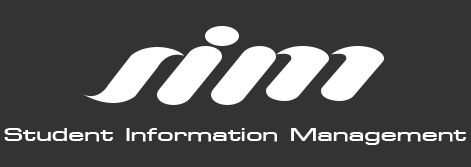
<style>
.page{position:relative;width:471px;height:167px;background:#333333}
.page>*{position:absolute;margin:0}
.t1{font:27.3px "PSLNatrinthornExtra";letter-spacing:0.025em;color:#ffffff;scale:1.12 1}
</style>
<div class="page">
<p class="t1" style="left:4px;top:128px;width:462px;height:17px">Student Information Management</p>
</div>
